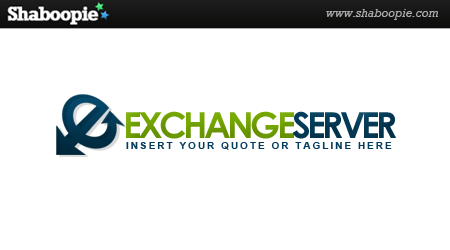
<style>
.page{position:relative;width:450px;height:250px;background:#ffffff}
.page>*{position:absolute;margin:0}
.t1{font:36px "CenturyGothic-Bold";letter-spacing:-0.1em;color:#76a901;text-transform:uppercase}
.t2{font:36px "CenturyGothic-Bold";letter-spacing:-0.1em;color:#033d5b;text-transform:uppercase}
.t3{font:10px "Arial-BoldMT";letter-spacing:0.2em;color:#033d5b;text-transform:uppercase}
</style>
<div class="page">
<p class="t1" style="left:126px;top:111px;width:270px;height:28px">exchange<span class="t2">server</span></p>
<p class="t3" style="left:126px;top:142px;width:266px;height:8px">INSERT YOUR QUOTE OR TAGLINE HERE</p>
</div>
